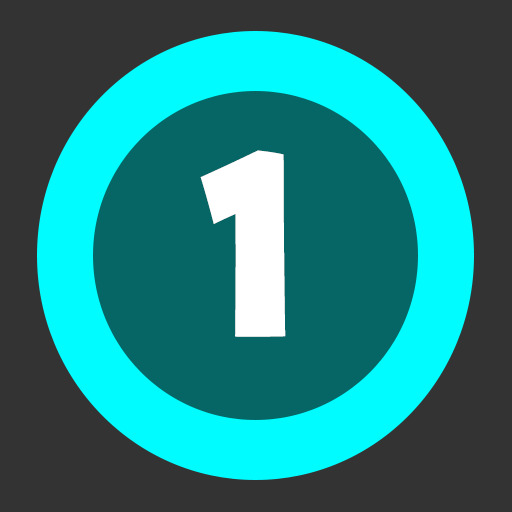
<style>
.page{position:relative;width:512px;height:512px;background:#333333}
.page>*{position:absolute;margin:0}
.t1{font:266.7px "BurbankBigCondensed-Black";color:#ffffff}
</style>
<div class="page">
<p class="t1" style="left:200px;top:150px;width:86px;height:187px">1</p>
</div>
